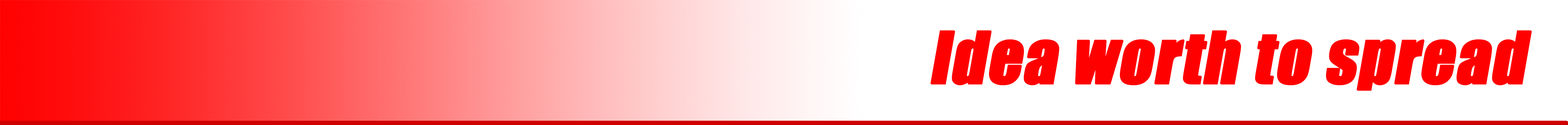
<style>
.page{position:relative;width:1568px;height:125px;background:#ffffff}
.page>*{position:absolute;margin:0}
.t1{font:66.2px "Impact";color:#ff0000;font-weight:bold;font-style:italic}
</style>
<div class="page">
<p class="t1" style="left:930px;top:30px;width:602px;height:61px">Idea worth to spread</p>
</div>
